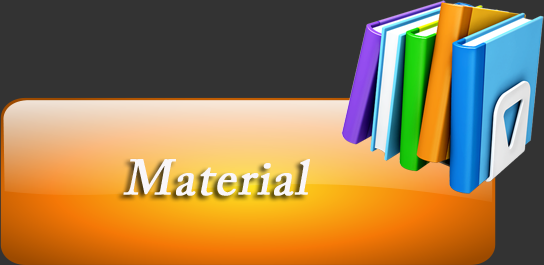
<style>
.page{position:relative;width:544px;height:265px;background:#333333}
.page>*{position:absolute;margin:0}
.t1{font:48px "ACaslonPro-Regular";letter-spacing:0.02em;color:#f9f6f9;font-weight:bold;font-style:italic}
</style>
<div class="page">
<p class="t1" style="left:123px;top:159px;width:187px;height:37px">Material</p>
</div>
